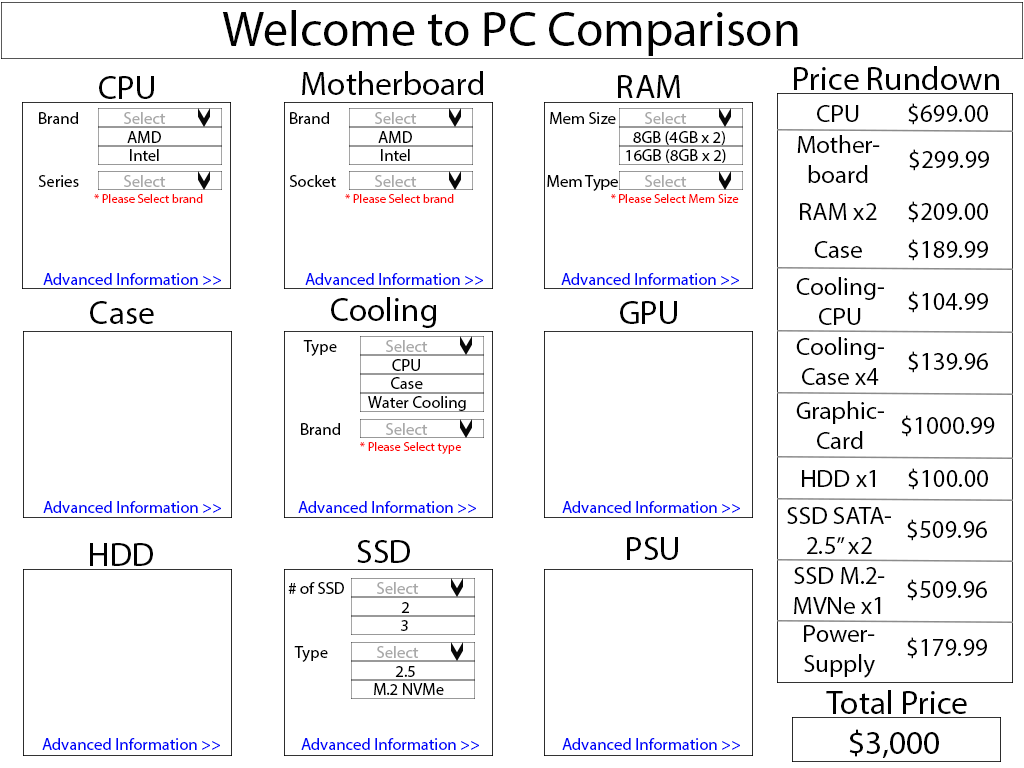
<style>
.page{position:relative;width:1024px;height:768px;background:#ffffff}
.page>*{position:absolute;margin:0}
.t1{font:50px "MyriadPro-Regular";color:#000000}
.t2{font:33.3px "MyriadPro-Regular";color:#000000}
.t3{font:16.7px "MyriadPro-Regular";color:#000000}
.t4{font:16.7px "MyriadPro-Regular";color:#a9a9a9}
.t5{font:25px "MyriadPro-Regular";color:#000000}
.t6{font:12.5px "MyriadPro-Regular";color:#ff0000}
.t7{font:16.7px "MyriadPro-Regular";color:#0006f9}
</style>
<div class="page">
<p class="t1" style="left:222px;top:10px;width:576px;height:46px">Welcome to PC Comparison</p>
<p class="t2" style="left:99px;top:76px;width:55px;height:23px">CPU</p>
<p class="t2" style="left:302px;top:71px;width:181px;height:24px">Motherboard</p>
<p class="t2" style="left:618px;top:75px;width:62px;height:23px">RAM</p>
<p class="t2" style="left:794px;top:66px;width:205px;height:24px">Price Rundown</p>
<p class="t3" style="left:39px;top:112px;width:39px;height:12px">Brand</p>
<p class="t4" style="left:124px;top:112px;width:42px;height:12px">Select</p>
<p class="t3" style="left:290px;top:112px;width:39px;height:12px">Brand</p>
<p class="t4" style="left:375px;top:112px;width:42px;height:12px">Select</p>
<p class="t3" style="left:550px;top:112px;width:66px;height:12px">Mem Size</p>
<p class="t4" style="left:645px;top:112px;width:42px;height:12px">Select</p>
<p class="t5" style="left:817px;top:105px;width:42px;height:17px">CPU</p>
<p class="t5" style="left:908px;top:103px;width:80px;height:22px">$699.00</p>
<p class="t3" style="left:127px;top:131px;width:34px;height:12px">AMD</p>
<p class="t3" style="left:378px;top:131px;width:34px;height:12px">AMD</p>
<p class="t3" style="left:633px;top:131px;width:92px;height:14px">8GB (4GB x 2)</p>
<p class="t5" style="left:797px;top:135px;width:83px;height:48px;text-align:center">Mother-<br>board</p>
<p class="t3" style="left:130px;top:149px;width:29px;height:12px">Intel</p>
<p class="t3" style="left:381px;top:149px;width:29px;height:12px">Intel</p>
<p class="t3" style="left:626px;top:149px;width:100px;height:14px">16GB (8GB x 2)</p>
<p class="t5" style="left:909px;top:149px;width:80px;height:22px">$299.99</p>
<p class="t3" style="left:38px;top:175px;width:41px;height:12px">Series</p>
<p class="t4" style="left:124px;top:175px;width:42px;height:12px">Select</p>
<p class="t3" style="left:289px;top:175px;width:47px;height:12px">Socket</p>
<p class="t4" style="left:375px;top:175px;width:42px;height:12px">Select</p>
<p class="t3" style="left:547px;top:175px;width:71px;height:16px">Mem Type</p>
<p class="t4" style="left:645px;top:175px;width:42px;height:12px">Select</p>
<p class="t6" style="left:94px;top:194px;width:109px;height:9px">* Please Select brand</p>
<p class="t6" style="left:345px;top:194px;width:109px;height:9px">* Please Select brand</p>
<p class="t6" style="left:611px;top:194px;width:128px;height:9px">* Please Select Mem Size</p>
<p class="t5" style="left:800px;top:203px;width:77px;height:17px">RAM x2</p>
<p class="t5" style="left:908px;top:201px;width:80px;height:22px">$209.00</p>
<p class="t5" style="left:814px;top:241px;width:48px;height:17px">Case</p>
<p class="t5" style="left:908px;top:239px;width:80px;height:22px">$189.99</p>
<p class="t7" style="left:43px;top:273px;width:178px;height:12px">Advanced Information &gt;&gt;</p>
<p class="t7" style="left:305px;top:273px;width:178px;height:12px">Advanced Information &gt;&gt;</p>
<p class="t7" style="left:561px;top:273px;width:178px;height:12px">Advanced Information &gt;&gt;</p>
<p class="t5" style="left:796px;top:277px;width:88px;height:48px;text-align:center">Cooling-<br>CPU</p>
<p class="t5" style="left:908px;top:291px;width:80px;height:22px">$104.99</p>
<p class="t2" style="left:90px;top:301px;width:64px;height:23px">Case</p>
<p class="t2" style="left:331px;top:297px;width:105px;height:31px">Cooling</p>
<p class="t2" style="left:620px;top:301px;width:57px;height:23px">GPU</p>
<p class="t3" style="left:303px;top:340px;width:34px;height:16px">Type</p>
<p class="t4" style="left:386px;top:340px;width:42px;height:12px">Select</p>
<p class="t5" style="left:796px;top:337px;width:88px;height:48px;text-align:center">Cooling-<br>Case x4</p>
<p class="t5" style="left:908px;top:351px;width:80px;height:22px">$139.96</p>
<p class="t3" style="left:392px;top:359px;width:28px;height:12px">CPU</p>
<p class="t3" style="left:391px;top:377px;width:32px;height:12px">Case</p>
<p class="t3" style="left:368px;top:396px;width:98px;height:15px">Water Cooling</p>
<p class="t5" style="left:796px;top:401px;width:88px;height:48px;text-align:center">Graphic-<br>Card</p>
<p class="t3" style="left:301px;top:423px;width:39px;height:12px">Brand</p>
<p class="t4" style="left:386px;top:423px;width:42px;height:12px">Select</p>
<p class="t5" style="left:901px;top:415px;width:94px;height:22px">$1000.99</p>
<p class="t6" style="left:360px;top:442px;width:101px;height:12px">* Please Select type</p>
<p class="t5" style="left:802px;top:470px;width:73px;height:17px">HDD x1</p>
<p class="t5" style="left:908px;top:468px;width:80px;height:22px">$100.00</p>
<p class="t7" style="left:43px;top:501px;width:178px;height:12px">Advanced Information &gt;&gt;</p>
<p class="t7" style="left:298px;top:501px;width:178px;height:12px">Advanced Information &gt;&gt;</p>
<p class="t7" style="left:562px;top:501px;width:178px;height:12px">Advanced Information &gt;&gt;</p>
<p class="t5" style="left:787px;top:507px;width:104px;height:47px;text-align:center">SSD SATA-<br>2.5” x2</p>
<p class="t5" style="left:907px;top:519px;width:80px;height:22px">$509.96</p>
<p class="t2" style="left:90px;top:543px;width:63px;height:23px">HDD</p>
<p class="t2" style="left:357px;top:540px;width:53px;height:23px">SSD</p>
<p class="t2" style="left:627px;top:537px;width:51px;height:23px">PSU</p>
<p class="t5" style="left:794px;top:567px;width:91px;height:47px;text-align:center">SSD M.2-<br>MVNe x1</p>
<p class="t3" style="left:288px;top:582px;width:56px;height:12px"># of SSD</p>
<p class="t4" style="left:377px;top:582px;width:42px;height:12px">Select</p>
<p class="t5" style="left:907px;top:579px;width:80px;height:22px">$509.96</p>
<p class="t3" style="left:401px;top:602px;width:8px;height:11px">2</p>
<p class="t3" style="left:400px;top:620px;width:8px;height:11px">3</p>
<p class="t5" style="left:804px;top:625px;width:71px;height:53px;text-align:center">Power-<br>Supply</p>
<p class="t5" style="left:907px;top:637px;width:80px;height:22px">$179.99</p>
<p class="t3" style="left:294px;top:646px;width:34px;height:16px">Type</p>
<p class="t4" style="left:377px;top:646px;width:42px;height:12px">Select</p>
<p class="t3" style="left:395px;top:666px;width:20px;height:11px">2.5</p>
<p class="t3" style="left:374px;top:683px;width:70px;height:12px">M.2 NVMe</p>
<p class="t2" style="left:826px;top:690px;width:141px;height:24px">Total Price</p>
<p class="t2" style="left:849px;top:729px;width:90px;height:29px">$3,000</p>
<p class="t7" style="left:42px;top:738px;width:178px;height:12px">Advanced Information &gt;&gt;</p>
<p class="t7" style="left:301px;top:738px;width:178px;height:12px">Advanced Information &gt;&gt;</p>
<p class="t7" style="left:562px;top:738px;width:178px;height:12px">Advanced Information &gt;&gt;</p>
</div>
